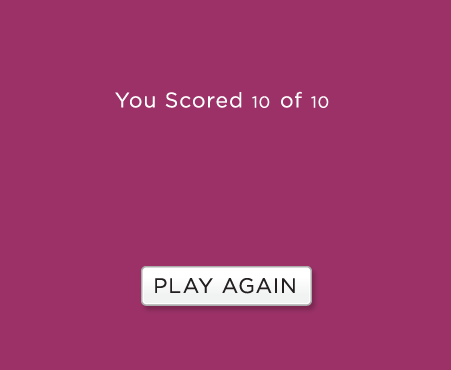
<style>
.page{position:relative;width:451px;height:370px;background:#9b3167}
.page>*{position:absolute;margin:0}
.t1{font:21px "Gotham-Book";letter-spacing:0.05em;color:#ffffff}
.t2{font:16px "Gotham-Book";letter-spacing:0.05em;color:#ffffff}
.t3{font:21px "Gotham-Book";letter-spacing:0.05em;color:#231f20}
</style>
<div class="page">
<p class="t1" style="left:115px;top:92px;width:127px;height:16px">You Scored</p>
<p class="t2" style="left:252px;top:96px;width:18px;height:12px">10</p>
<p class="t1" style="left:281px;top:91px;width:21px;height:17px">of</p>
<p class="t2" style="left:311px;top:96px;width:18px;height:12px">10</p>
<p class="t3" style="left:155px;top:278px;width:140px;height:16px">PLAY AGAIN</p>
</div>
